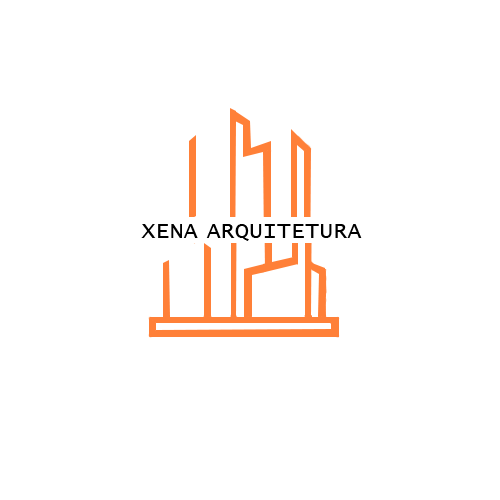
<style>
.page{position:relative;width:500px;height:500px;background:#ffffff}
.page>*{position:absolute;margin:0}
.t1{font:23.4px "LucidaConsole";color:#000000}
</style>
<div class="page">
<p class="t1" style="left:206px;top:224px;width:156px;height:17px">ARQUITETURA</p>
</div>
